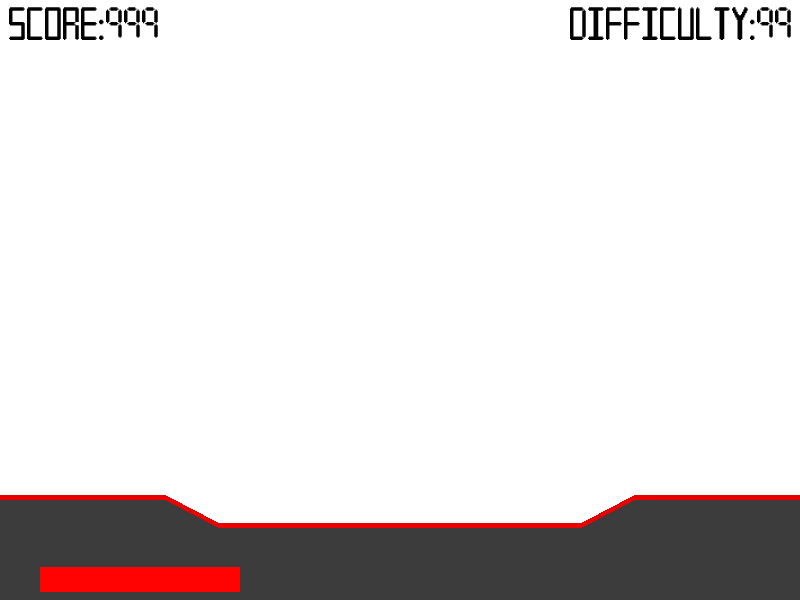
<style>
.page{position:relative;width:800px;height:600px;background:#ffffff}
.page>*{position:absolute;margin:0}
.t1{font:36px "Font1";color:#020202}
</style>
<div class="page">
<p class="t1" style="left:9px;top:7px;width:149px;height:33px">Score:999</p>
<p class="t1" style="left:570px;top:7px;width:221px;height:33px">Difficulty:99</p>
</div>
